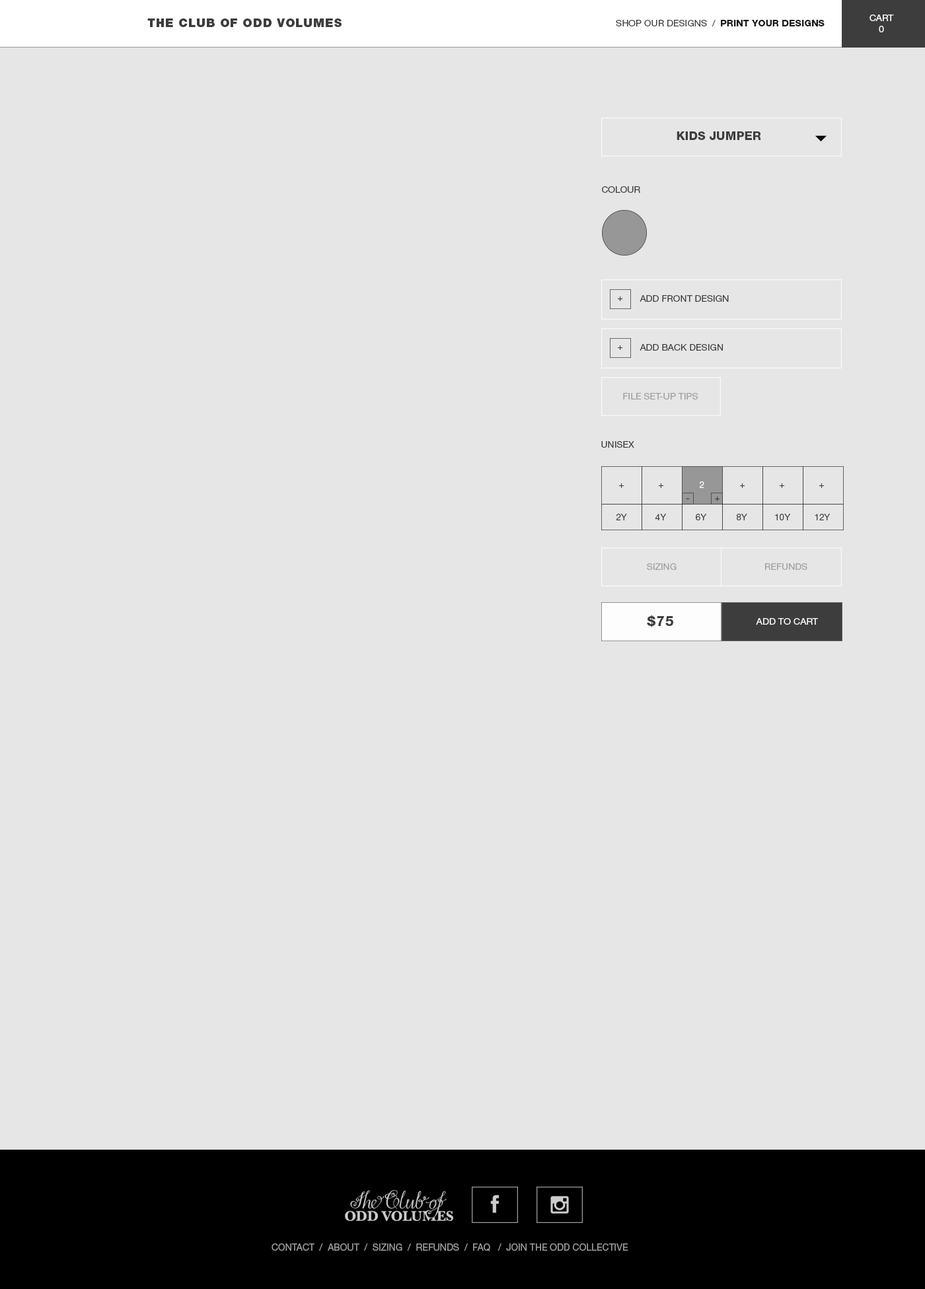
<style>
.page{position:relative;width:925px;height:1289px;background:#e6e6e6}
.page>*{position:absolute;margin:0}
.t1{font:9.2px "HelveticaNeueLTStd-Roman";color:#ffffff}
.t2{font:11.9px "HelveticaNeueLTStd-Blk";letter-spacing:0.05em;color:#3d3d3d}
.t3{font:9.2px "HelveticaNeueLTStd-Roman";color:#3d3d3d}
.t4{font:9.2px "HelveticaNeueLTStd-Hv";color:#1b1b1b}
.t5{font:11.9px "HelveticaNeueLTStd-Hv";color:#3d3d3d}
.t6{font:9.2px "HelveticaNeueLTStd-Roman";color:#3e3e3e}
.t7{font:9.1px "HelveticaNeueLTStd-Roman";color:#3e3e3e}
.t8{font:9.2px "HelveticaNeueLTStd-Roman";color:#a0a0a0}
.t9{font:9.1px "HelveticaNeueLTStd-Roman";color:#ffffff}
.t10{font:9.1px "HelveticaNeueLTStd-Roman";color:#3d3d3d}
.t11{font:13.2px "HelveticaNeueLTStd-Hv";letter-spacing:0.05em;color:#3d3d3d}
.t12{font:9.2px "HelveticaNeueLTStd-Roman";color:#faf9f9}
.t13{font:9.5px "HelveticaNeueLTStd-Roman";color:#9b9b9b}
</style>
<div class="page">
<p class="t1" style="left:869px;top:15px;width:25px;height:17px;text-align:center">CART<br>0</p>
<p class="t2" style="left:147px;top:18px;width:195px;height:9px">THE CLUB OF ODD VOLUMES</p>
<p class="t3" style="left:616px;top:20px;width:208px;height:6px">SHOP OUR DESIGNS  /  <span class="t4">PRINT YOUR DESIGNS</span></p>
<p class="t5" style="left:676px;top:131px;width:85px;height:9px">KIDS JUMPER</p>
<p class="t6" style="left:602px;top:186px;width:38px;height:7px">COLOUR</p>
<p class="t7" style="left:618px;top:297px;width:5px;height:4px">+</p>
<p class="t6" style="left:639px;top:295px;width:90px;height:7px">ADD FRONT DESIGN</p>
<p class="t7" style="left:618px;top:345px;width:5px;height:5px">+</p>
<p class="t6" style="left:639px;top:344px;width:84px;height:7px">ADD BACK DESIGN</p>
<p class="t8" style="left:623px;top:393px;width:75px;height:7px">FILE SET-UP TIPS</p>
<p class="t6" style="left:601px;top:441px;width:33px;height:7px">UNISEX</p>
<p class="t7" style="left:619px;top:484px;width:5px;height:4px">+</p>
<p class="t7" style="left:658px;top:484px;width:5px;height:4px">+</p>
<p class="t9" style="left:699px;top:482px;width:5px;height:6px">2</p>
<p class="t7" style="left:740px;top:484px;width:5px;height:4px">+</p>
<p class="t7" style="left:779px;top:484px;width:5px;height:4px">+</p>
<p class="t7" style="left:818px;top:484px;width:6px;height:4px">+</p>
<p class="t7" style="left:715px;top:497px;width:5px;height:4px">+</p>
<p class="t7" style="left:686px;top:498px;width:3px;height:1px">-</p>
<p class="t7" style="left:616px;top:514px;width:11px;height:7px">2Y</p>
<p class="t7" style="left:655px;top:514px;width:12px;height:7px">4Y</p>
<p class="t10" style="left:696px;top:514px;width:11px;height:7px">6Y</p>
<p class="t7" style="left:737px;top:514px;width:10px;height:7px">8Y</p>
<p class="t7" style="left:775px;top:514px;width:16px;height:7px">10Y</p>
<p class="t7" style="left:814px;top:514px;width:16px;height:7px">12Y</p>
<p class="t8" style="left:647px;top:563px;width:29px;height:7px">SIZING</p>
<p class="t8" style="left:765px;top:563px;width:42px;height:7px">REFUNDS</p>
<p class="t11" style="left:647px;top:615px;width:26px;height:13px">$75</p>
<p class="t12" style="left:756px;top:618px;width:62px;height:7px">ADD TO CART</p>
<p class="t13" style="left:271px;top:1244px;width:357px;height:8px">CONTACT  /  ABOUT  /  SIZING  /  REFUNDS  /  FAQ   /  JOIN THE ODD COLLECTIVE</p>
</div>
